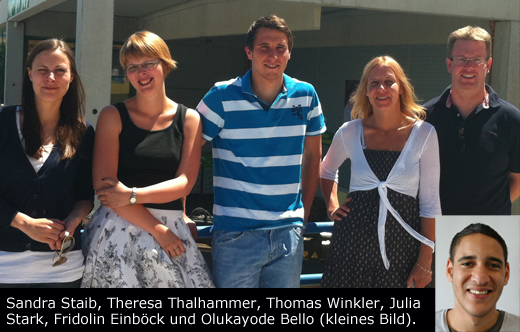
<style>
.page{position:relative;width:520px;height:332px}
.page>*{position:absolute;margin:0}
.t1{font:14px/16px "Verdana";color:#ffffff}
</style>
<div class="page">
<p class="t1" style="left:7px;top:297px;width:413px;height:30px">Sandra Staib, Theresa Thalhammer, Thomas Winkler, Julia<br>Stark, Fridolin Einböck und Olukayode Bello (kleines Bild).</p>
</div>
